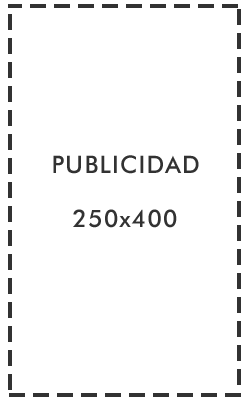
<style>
.page{position:relative;width:250px;height:400px;background:#ffffff}
.page>*{position:absolute;margin:0}
.t1{font:24px "FuturaBT-Medium";letter-spacing:0.05em;color:#323232}
</style>
<div class="page">
<p class="t1" style="left:53px;top:155px;width:146px;height:19px">PUBLICIDAD</p>
<p class="t1" style="left:73px;top:209px;width:104px;height:19px">250x400</p>
</div>
